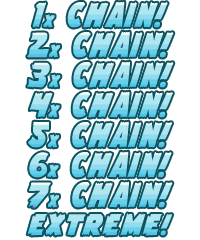
<style>
.page{position:relative;width:200px;height:240px;background:#ffffff}
.page>*{position:absolute;margin:0}
.t1{font:48px "Flying-Leatherneck";text-transform:uppercase;scale:0.9 1}
.t2{font:24px "Flying-Leatherneck";text-transform:uppercase;scale:0.9 1}
.t3{font:41px "Flying-Leatherneck";text-transform:uppercase;scale:0.9 1}
</style>
<div class="page">
<p class="t1" style="left:32px;top:1px;width:136px;height:27px">1<span class="t2">x</span> Chain!</p>
<p class="t1" style="left:27px;top:31px;width:147px;height:27px">2<span class="t2">x</span> Chain!</p>
<p class="t1" style="left:27px;top:61px;width:147px;height:27px">3<span class="t2">x</span> Chain!</p>
<p class="t1" style="left:29px;top:91px;width:144px;height:27px">4<span class="t2">x</span> Chain!</p>
<p class="t1" style="left:28px;top:121px;width:145px;height:27px">5<span class="t2">x</span> Chain!</p>
<p class="t1" style="left:29px;top:151px;width:143px;height:27px">6<span class="t2">x</span> Chain!</p>
<p class="t1" style="left:28px;top:181px;width:145px;height:27px">7<span class="t2">x</span> Chain!</p>
<p class="t3" style="left:27px;top:213px;width:146px;height:23px">EXTREME!</p>
</div>
